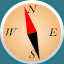
<style>
.page{position:relative;width:64px;height:64px}
.page>*{position:absolute;margin:0}
.t1{font:12px "BellMTItalic";color:#000000}
</style>
<div class="page">
<p class="t1" style="left:26px;top:5px;width:12px;height:8px">N</p>
<p class="t1" style="left:5px;top:28px;width:13px;height:9px">W</p>
<p class="t1" style="left:48px;top:28px;width:9px;height:8px">E</p>
<p class="t1" style="left:29px;top:50px;width:7px;height:9px">S</p>
</div>
